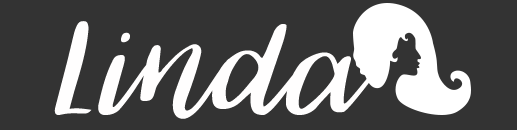
<style>
.page{position:relative;width:517px;height:130px;background:#333333}
.page>*{position:absolute;margin:0}
.t1{font:157.2px "Jasmine-Regular";letter-spacing:0.005em;color:#fffefe}
</style>
<div class="page">
<p class="t1" style="left:54px;top:21px;width:332px;height:98px">Linda</p>
</div>
